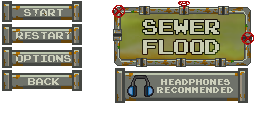
<style>
.page{position:relative;width:256px;height:128px;background:#ffffff}
.page>*{position:absolute;margin:0}
.t1{font:8px "PressStartReg";color:#cdd0bc;text-transform:uppercase}
.t2{font:15.6px/20px "PressStartK";color:#c9ccb2;text-transform:uppercase}
.t3{font:7px/8px "PressStartReg";color:#cdd0bc;text-transform:uppercase}
</style>
<div class="page">
<p class="t1" style="left:24px;top:9px;width:39px;height:7px">Start</p>
<p class="t2" style="left:143px;top:20px;width:76px;height:34px">Sewer<br>Flood</p>
<p class="t1" style="left:16px;top:32px;width:55px;height:7px">RESTART</p>
<p class="t1" style="left:16px;top:55px;width:55px;height:7px">options</p>
<p class="t1" style="left:28px;top:78px;width:31px;height:7px">BACK</p>
<p class="t3" style="left:157px;top:79px;width:76px;height:14px;text-align:center">HEADPHONES<br>recommended</p>
</div>
